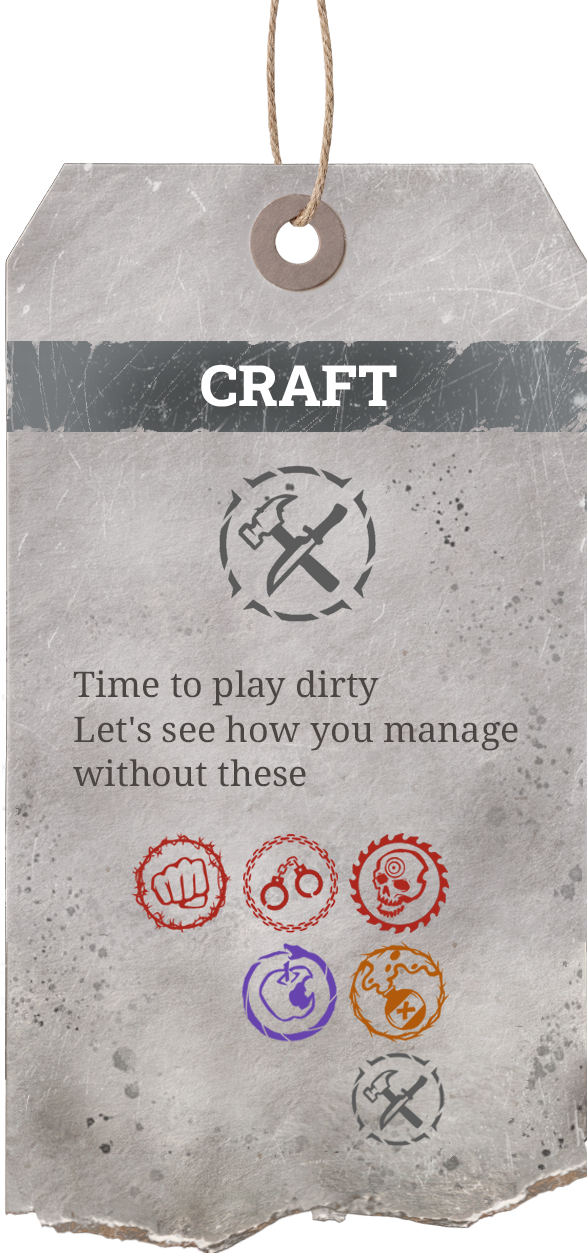
<style>
.page{position:relative;width:587px;height:1253px}
.page>*{position:absolute;margin:0}
.t1{font:57.1px "RobotoSlab-ExtraBold";color:#ffffff}
.t2{font:35.3px/44.6px "NotoSerif-Medium";color:#4b4544}
</style>
<div class="page">
<p class="t1" style="left:201px;top:364px;width:196px;height:43px">CRAFT</p>
<p class="t2" style="left:73px;top:670px;width:445px;height:117px">Time to play dirty<br>Let's see how you manage without these</p>
</div>
